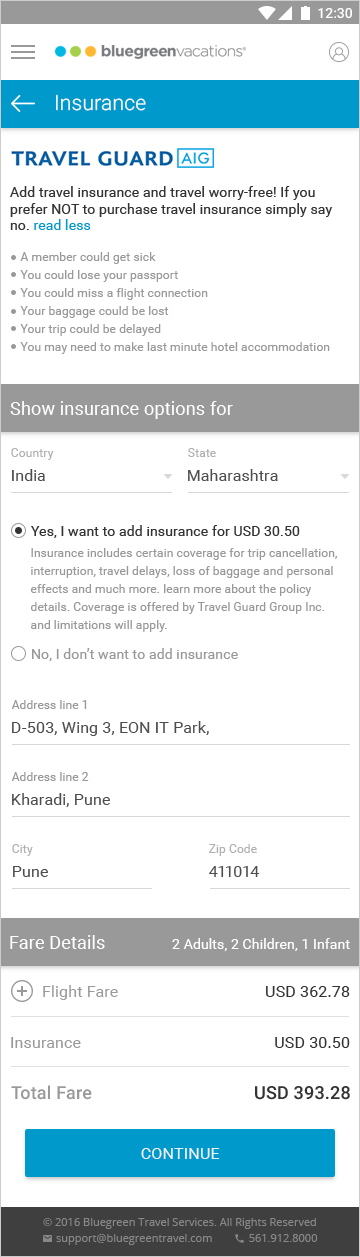
<style>
.page{position:relative;width:360px;height:1257px;background:#ffffff}
.page>*{position:absolute;margin:0}
.t1{font:21px "Roboto-Light";letter-spacing:0.01em;color:#ffffff}
.t2{font:14px "Roboto-Regular";letter-spacing:0.01em;color:#333333}
.t3{font:14px "Roboto-Regular";letter-spacing:0.01em;color:#0099cc}
.t4{font:12px/18px "Roboto-Regular";letter-spacing:0.01em;color:#999999}
.t5{font:18px "Roboto-Regular";letter-spacing:0.01em;color:#ffffff}
.t6{font:12px "Roboto-Regular";letter-spacing:0.01em;color:#b1b1b1}
.t7{font:16px "Roboto-Regular";letter-spacing:0.01em;color:#4d4d4d}
.t8{font:14px "Roboto-Regular";letter-spacing:0.01em;color:#999999}
.t9{font:12px "Roboto-Regular";letter-spacing:0.01em;color:#999999}
.t10{font:14px "Roboto-Regular";letter-spacing:0.01em;color:#ffffff}
.t11{font:16px "Roboto-Regular";letter-spacing:0.01em;color:#999999}
.t12{font:16px "Roboto-Regular";letter-spacing:0.01em;color:#333333}
.t13{font:18px "Roboto-Medium";letter-spacing:0.01em;color:#999999}
.t14{font:18px "Roboto-Medium";letter-spacing:0.01em;color:#333333}
.t15{font:16px "Roboto-Regular";letter-spacing:0.01em;color:#ffffff;text-transform:uppercase}
</style>
<div class="page">
<p class="t1" style="left:56px;top:94px;width:90px;height:17px">Insurance</p>
<p class="t2" style="left:10px;top:186px;width:323px;height:44px">Add travel insurance and travel worry-free! If you prefer NOT to purchase travel insurance simply say no. <span class="t3">read less</span></p>
<p class="t4" style="left:20px;top:252px;width:310px;height:102px">A member could get sick<br>You could lose your passport<br>You could miss a flight connection<br>Your baggage could be lost<br>Your trip could be delayed<br>You may need to make last minute hotel accommodation</p>
<p class="t5" style="left:10px;top:401px;width:223px;height:18px">Show insurance options for</p>
<p class="t6" style="left:11px;top:448px;width:43px;height:12px">Country</p>
<p class="t6" style="left:188px;top:448px;width:28px;height:9px">State</p>
<p class="t7" style="left:12px;top:469px;width:33px;height:12px">India</p>
<p class="t7" style="left:188px;top:469px;width:90px;height:12px">Maharashtra</p>
<p class="t2" style="left:31px;top:525px;width:269px;height:13px">Yes, I want to add insurance for USD 30.50</p>
<p class="t4" style="left:30px;top:548px;width:307px;height:84px">Insurance includes certain coverage for trip cancellation, interruption, travel delays, loss of baggage and personal effects and much more. learn more about the policy <br>details. Coverage is offered by Travel Guard Group Inc. <br>and limitations will apply.</p>
<p class="t8" style="left:32px;top:648px;width:206px;height:13px">No, I don’t want to add insurance</p>
<p class="t9" style="left:11px;top:700px;width:76px;height:9px">Address line 1</p>
<p class="t7" style="left:12px;top:721px;width:197px;height:15px">D-503, Wing 3, EON IT Park,</p>
<p class="t9" style="left:11px;top:772px;width:78px;height:9px">Address line 2</p>
<p class="t7" style="left:12px;top:793px;width:98px;height:14px">Kharadi, Pune</p>
<p class="t6" style="left:12px;top:844px;width:21px;height:12px">City</p>
<p class="t6" style="left:209px;top:844px;width:48px;height:12px">Zip Code</p>
<p class="t7" style="left:13px;top:866px;width:35px;height:11px">Pune</p>
<p class="t7" style="left:209px;top:866px;width:50px;height:11px">411014</p>
<p class="t5" style="left:10px;top:935px;width:95px;height:14px">Fare Details</p>
<p class="t10" style="left:172px;top:938px;width:178px;height:13px">2 Adults, 2 Children, 1 Infant</p>
<p class="t11" style="left:43px;top:985px;width:75px;height:15px">Flight Fare</p>
<p class="t12" style="left:266px;top:986px;width:84px;height:11px">USD 362.78</p>
<p class="t11" style="left:11px;top:1037px;width:70px;height:11px">Insurance</p>
<p class="t12" style="left:275px;top:1037px;width:75px;height:11px">USD 30.50</p>
<p class="t13" style="left:11px;top:1085px;width:81px;height:15px">Total Fare</p>
<p class="t14" style="left:255px;top:1086px;width:95px;height:14px">USD 393.28</p>
<p class="t15" style="left:141px;top:1148px;width:79px;height:11px;opacity:0.87">CONTINUE</p>
</div>
